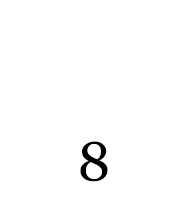
<style>
.page{position:relative;width:188px;height:202px;background:#ffffff}
.page>*{position:absolute;margin:0}
.t1{font:54.4px "Georgia";color:#000000}
</style>
<div class="page">
<p class="t1" style="left:80px;top:141px;width:28px;height:41px">8</p>
</div>
